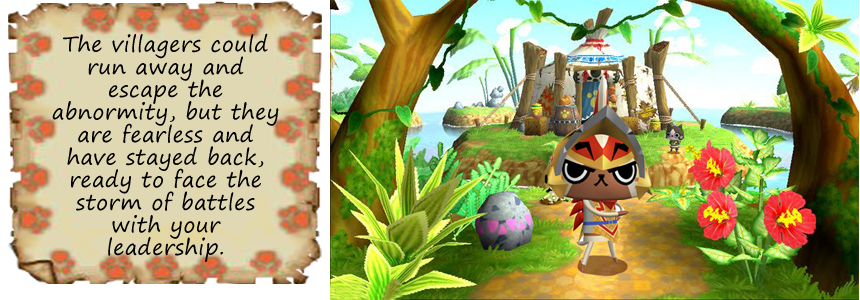
<style>
.page{position:relative;width:860px;height:300px}
.page>*{position:absolute;margin:0}
.t1{font:21.2px/22.6px "SegoePrint";letter-spacing:0.025em;color:#000000}
</style>
<div class="page">
<p class="t1" style="left:52px;top:33px;width:227px;height:229px;text-align:center">The villagers could run away and escape the <br>abnormity, but they are fearless and have stayed back, ready to face the storm of battles with your <br>leadership.</p>
</div>
